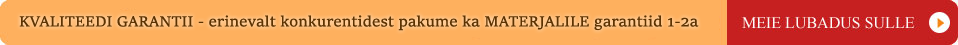
<style>
.page{position:relative;width:958px;height:45px;background:#feb05e}
.page>*{position:absolute;margin:0}
.t1{font:16px "SitkaText";color:#5d3200}
</style>
<div class="page">
<p class="t1" style="left:19px;top:15px;width:680px;height:16px">KVALITEEDI GARANTII - erinevalt konkurentidest pakume ka MATERJALILE garantiid 1-2a</p>
</div>
